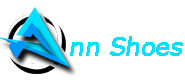
<style>
.page{position:relative;width:185px;height:80px;background:#ffffff}
.page>*{position:absolute;margin:0}
.t1{font:24px "Verdana";letter-spacing:-0.025em;color:#05defd;font-weight:bold;font-style:italic;scale:0.95 1}
</style>
<div class="page">
<p class="t1" style="left:70px;top:36px;width:113px;height:20px">nn Shoes</p>
</div>
